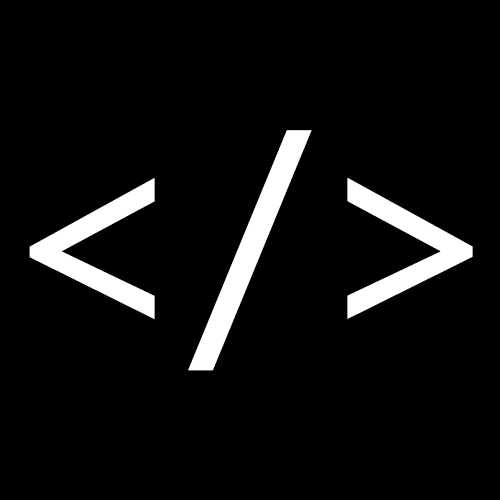
<style>
.page{position:relative;width:500px;height:500px;background:#000000}
.page>*{position:absolute;margin:0}
.t1{font:272px "MicrosoftYaHei";color:#ffffff}
</style>
<div class="page">
<p class="t1" style="left:29px;top:130px;width:444px;height:241px">&lt;/&gt;</p>
</div>
